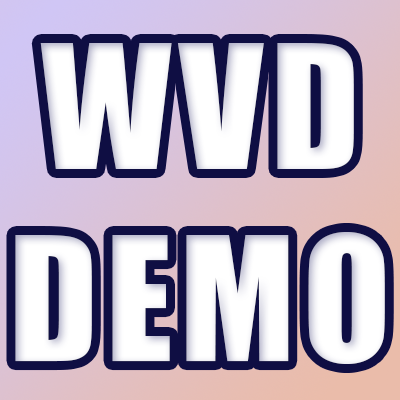
<style>
.page{position:relative;width:400px;height:400px}
.page>*{position:absolute;margin:0}
.t1{font:160px "Impact";letter-spacing:0.05em;color:#ffffff}
</style>
<div class="page">
<p class="t1" style="left:15px;top:43px;width:370px;height:321px;text-align:center">WVD<br>DEMO</p>
</div>
